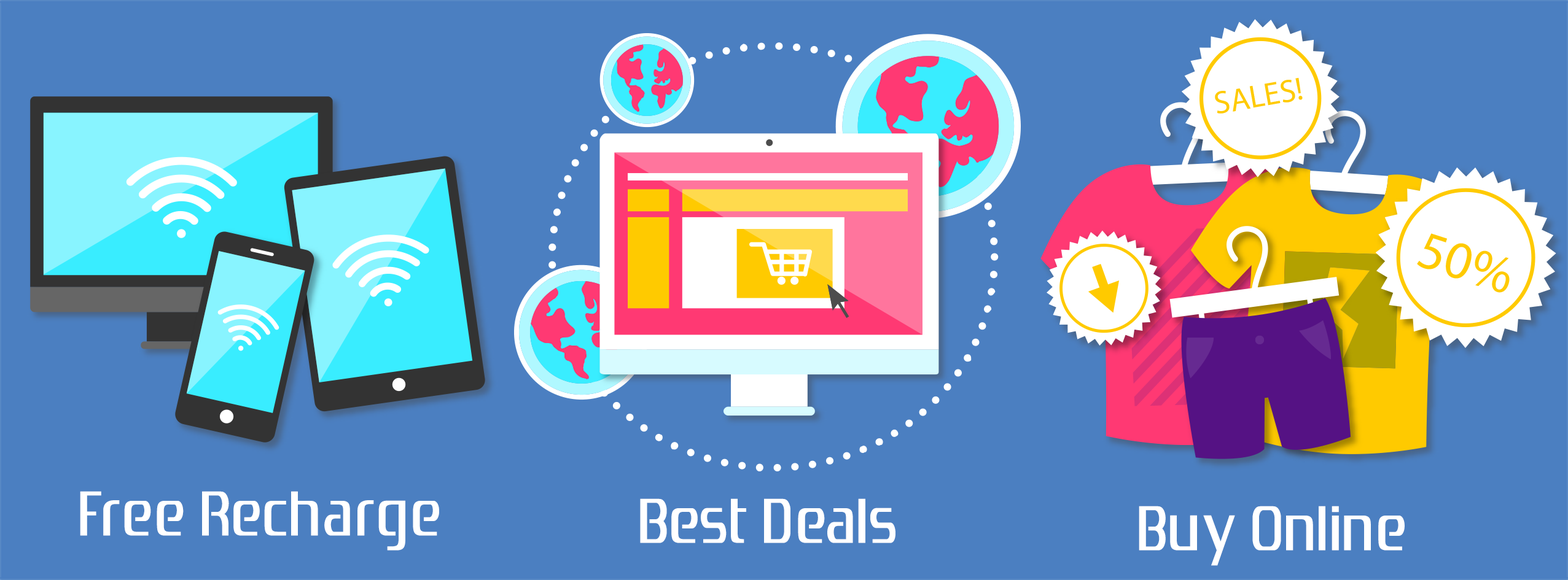
<style>
.page{position:relative;width:1568px;height:580px;background:#4b7fc1}
.page>*{position:absolute;margin:0}
.t1{font:66.3px "Zrnic";color:#ffffff}
</style>
<div class="page">
<p class="t1" style="left:80px;top:491px;width:359px;height:60px">Free Recharge</p>
<p class="t1" style="left:640px;top:499px;width:255px;height:45px">Best Deals</p>
<p class="t1" style="left:1139px;top:506px;width:266px;height:60px">Buy Online</p>
</div>
